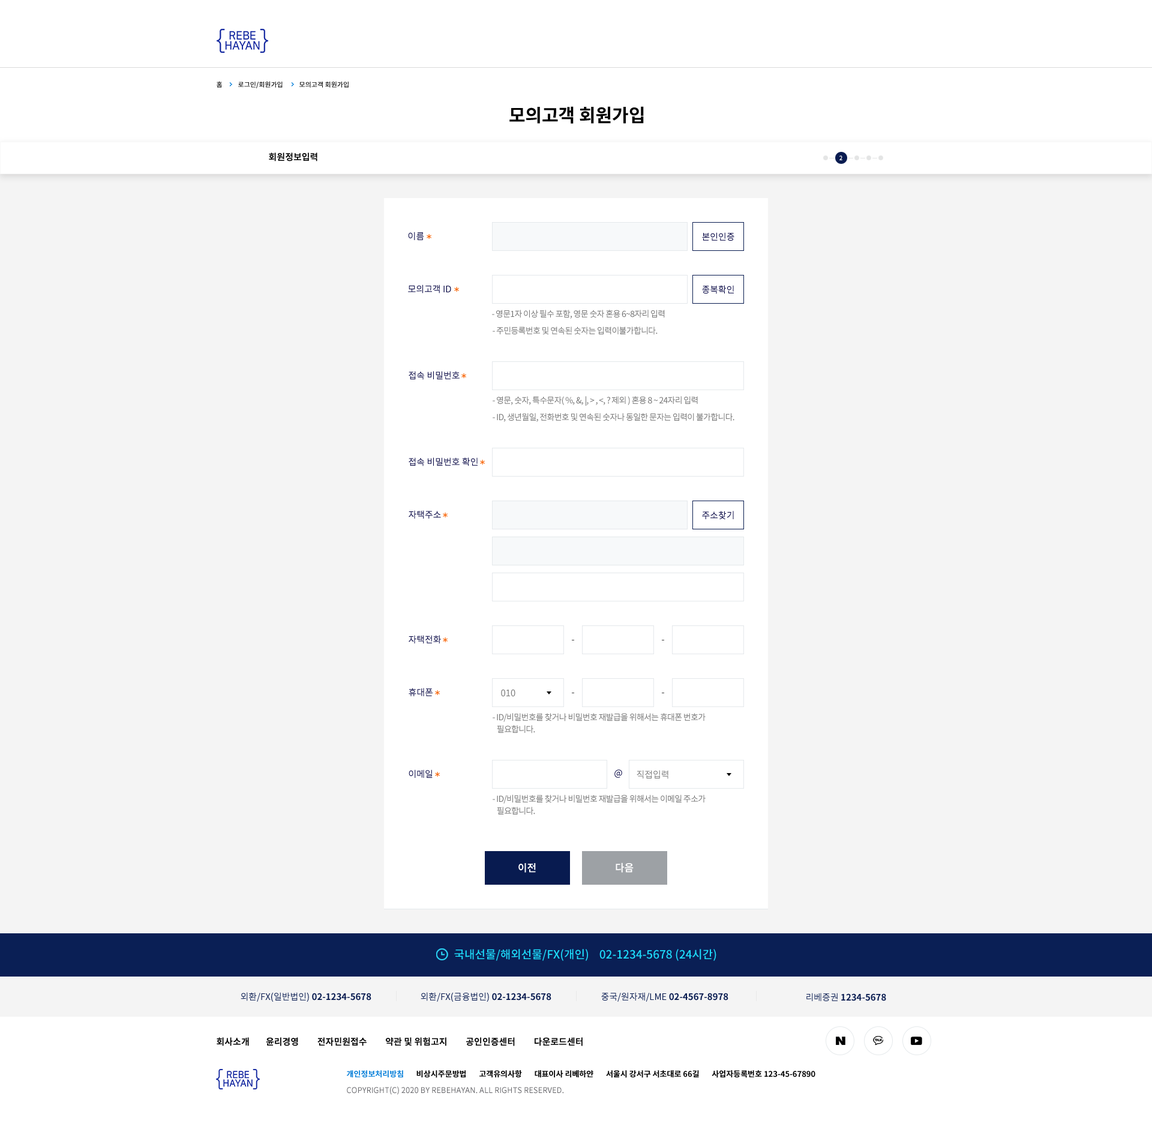
<style>
.page{position:relative;width:1152px;height:1135px;background:#f4f4f4}
.page>*{position:absolute;margin:0}
.t1{font:6.6px "NotoSansKR-Medium";color:#000000}
.t2{font:18px "NotoSansKR-Bold";color:#000000}
.t3{font:9px "NotoSansKR-Bold";color:#000000}
.t4{font:6px "NotoSansKR-Bold";color:#f4f5f5}
.t5{font:9px "NotoSansKR-Regular";color:#00003f}
.t6{font:8.4px "NotoSansKR-Regular";letter-spacing:-0.05em;color:#747474}
.t7{font:9px "NotoSansKR-Regular";color:#747474}
.t8{font:8.4px/12px "NotoSansKR-Regular";letter-spacing:-0.05em;color:#747474}
.t9{font:10.2px "NotoSansKR-Bold";color:#fefefe}
.t10{font:11.4px "NotoSansKR-Medium";color:#1dddfd}
.t11{font:9px "NotoSansKR-Bold";color:#081b50}
.t12{font:9px "NotoSansKR-Regular";color:#081b50}
.t13{font:7.8px "NotoSansKR-Bold";color:#000000}
.t14{font:7.8px "NotoSansKR-Bold";color:#067fd9}
.t15{font:7.8px "NotoSansKR-Regular";color:#66666a}
</style>
<div class="page">
<p class="t1" style="left:217px;top:81px;width:5px;height:7px">홈</p>
<p class="t1" style="left:238px;top:81px;width:45px;height:7px">로그인/회원가입</p>
<p class="t1" style="left:299px;top:81px;width:50px;height:7px">모의고객 회원가입</p>
<p class="t2" style="left:509px;top:106px;width:135px;height:18px">모의고객 회원가입</p>
<p class="t3" style="left:269px;top:152px;width:48px;height:9px">회원정보입력</p>
<p class="t4" style="left:839px;top:155px;width:3px;height:5px">2</p>
<p class="t5" style="left:408px;top:232px;width:16px;height:8px">이름</p>
<p class="t5" style="left:702px;top:232px;width:32px;height:9px">본인인증</p>
<p class="t5" style="left:408px;top:284px;width:43px;height:9px">모의고객 ID</p>
<p class="t5" style="left:702px;top:285px;width:32px;height:9px">종복확인</p>
<p class="t6" style="left:492px;top:310px;width:173px;height:9px">- 영문1자 이상 필수 포함, 영문 숫자 혼용 6~8자리 입력</p>
<p class="t6" style="left:493px;top:326px;width:165px;height:9px">- 주민등록번호 및 연속된 숫자는 입력이불가합니다.</p>
<p class="t5" style="left:409px;top:371px;width:51px;height:9px">접속 비밀번호</p>
<p class="t6" style="left:493px;top:396px;width:205px;height:10px">- 영문, 숫자, 특수문자( %, &amp;, |, &gt; , &lt;, ? 제외 ) 혼용 8 ~ 24자리 입력</p>
<p class="t6" style="left:493px;top:413px;width:241px;height:9px">- ID, 생년월일, 전화번호 및 연속된 숫자나 동일한 문자는 입력이 불가합니다.</p>
<p class="t5" style="left:409px;top:457px;width:69px;height:9px">접속 비밀번호 확인</p>
<p class="t5" style="left:409px;top:510px;width:32px;height:8px">자택주소</p>
<p class="t5" style="left:702px;top:511px;width:32px;height:9px">주소찾기</p>
<p class="t5" style="left:409px;top:635px;width:32px;height:8px">자택전화</p>
<p class="t5" style="left:409px;top:688px;width:24px;height:8px">휴대폰</p>
<p class="t7" style="left:501px;top:689px;width:14px;height:8px">010</p>
<p class="t8" style="left:493px;top:713px;width:213px;height:20px">- ID/비밀번호를 찾거나 비밀번호 재발급을 위해서는 휴대폰 번호가<br>   필요합니다.</p>
<p class="t5" style="left:409px;top:769px;width:24px;height:9px">이메일</p>
<p class="t5" style="left:614px;top:769px;width:8px;height:9px">@</p>
<p class="t7" style="left:637px;top:770px;width:31px;height:9px">직접입력</p>
<p class="t8" style="left:493px;top:794px;width:213px;height:21px">- ID/비밀번호를 찾거나 비밀번호 재발급을 위해서는 이메일 주소가<br>   필요합니다.</p>
<p class="t9" style="left:518px;top:863px;width:18px;height:9px">이전</p>
<p class="t9" style="left:616px;top:862px;width:18px;height:10px">다음</p>
<p class="t10" style="left:454px;top:949px;width:262px;height:12px">국내선물/해외선물/FX(개인)    02-1234-5678 (24시간)</p>
<p class="t11" style="left:241px;top:992px;width:130px;height:9px"><span class="t12">외환/FX(일반법인) </span>02-1234-5678</p>
<p class="t11" style="left:421px;top:992px;width:130px;height:9px"><span class="t12">외환/FX(금융법인) </span>02-1234-5678</p>
<p class="t11" style="left:601px;top:992px;width:127px;height:9px"><span class="t12">중국/원자재/LME </span>02-4567-8978</p>
<p class="t11" style="left:806px;top:992px;width:80px;height:9px"><span class="t12">리베증권 </span>1234-5678</p>
<p class="t3" style="left:217px;top:1037px;width:366px;height:9px">회사소개        윤리경영         전자민원접수         약관 및 위험고지         공인인증센터         다운로드센터</p>
<p class="t13" style="left:347px;top:1070px;width:468px;height:8px"><span class="t14">개인정보처리방침</span>       비상시주문방법       고객유의사항       대표이사 리베하얀       서울시 강서구 서초대로 66길       사업자등록번호 123-45-67890</p>
<p class="t15" style="left:347px;top:1086px;width:217px;height:8px">COPYRIGHT(C) 2020 BY REBEHAYAN. ALL RIGHTS RESERVED.</p>
</div>
